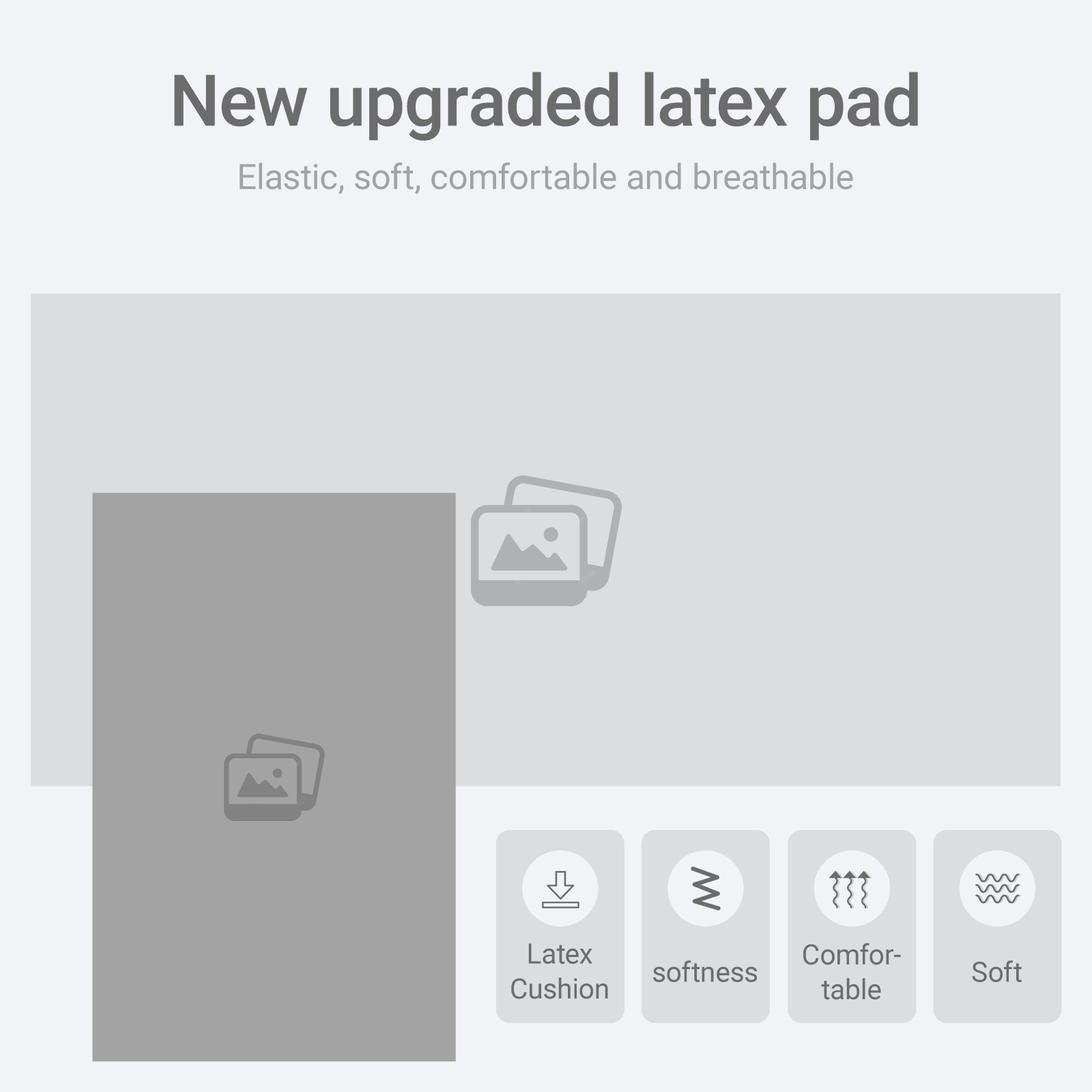
<style>
.page{position:relative;width:1092px;height:1092px;background:#f2f3f6}
.page>*{position:absolute;margin:0}
.t1{font:71.3px "Roboto-Medium";color:#6c6c6c}
.t2{font:34.9px "Roboto-Regular";color:#a3a3a3}
.t3{font:27.9px/34.9px "Roboto-Regular";color:#6c6c6c}
.t4{font:27.9px "Roboto-Regular";color:#6c6c6c}
</style>
<div class="page">
<p class="t1" style="left:174px;top:72px;width:744px;height:69px">New upgraded latex pad</p>
<p class="t2" style="left:240px;top:162px;width:613px;height:33px">Elastic, soft, comfortable and breathable</p>
<p class="t3" style="left:511px;top:943px;width:97px;height:56px;text-align:center">Latex<br>Cushion</p>
<p class="t3" style="left:803px;top:943px;width:98px;height:57px;text-align:center">Comfor-<br>table</p>
<p class="t4" style="left:653px;top:960px;width:105px;height:22px">softness</p>
<p class="t4" style="left:972px;top:960px;width:50px;height:22px">Soft</p>
</div>
